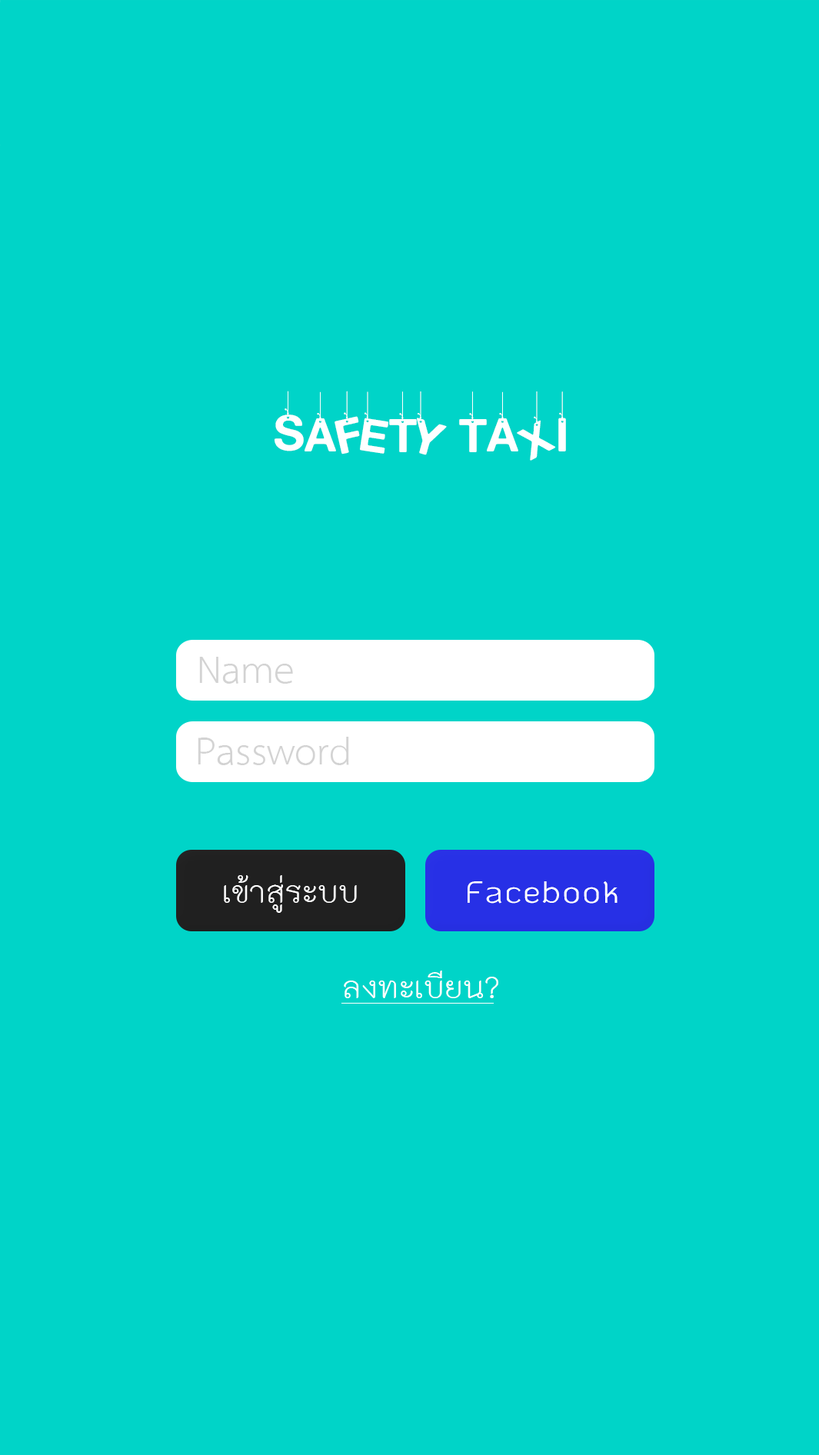
<style>
.page{position:relative;width:819px;height:1455px;background:#00d4c8}
.page>*{position:absolute;margin:0}
.t1{font:55.4px "HangingLetters";color:#ffffff}
.t2{font:55.4px "THSarabunPSK";color:#d3d3d3}
.t3{font:44.8px "THK2DJuly8";color:#ffffff}
.t4{font:44.8px "THKoHo-Bold";color:#ffffff}
</style>
<div class="page">
<p class="t1" style="left:275px;top:391px;width:291px;height:70px">SAFETY TAXI</p>
<p class="t2" style="left:199px;top:657px;width:94px;height:27px">Name</p>
<p class="t2" style="left:198px;top:737px;width:151px;height:28px">Password</p>
<p class="t3" style="left:224px;top:875px;width:133px;height:38px">เข้าสู่ระบบ</p>
<p class="t4" style="left:468px;top:882px;width:150px;height:22px">Facebook</p>
<p class="t3" style="left:344px;top:971px;width:154px;height:28px">ลงทะเบียน?</p>
</div>
